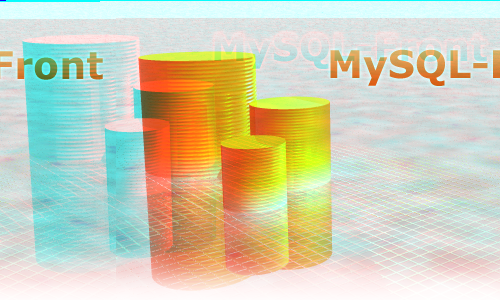
<style>
.page{position:relative;width:500px;height:300px}
.page>*{position:absolute;margin:0}
.t1{font:38px "Verdana-Bold"}
</style>
<div class="page">
<p class="t1" style="left:214px;top:31px;width:273px;height:37px">MySQL-Front</p>
</div>
